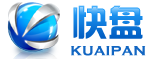
<style>
.page{position:relative;width:153px;height:59px;background:#ffffff}
.page>*{position:absolute;margin:0}
.t1{font:36px "¹ã½Ý¾ÓÃÔÄã×Ö¿â"}
.t2{font:17px "CopperplateGothic-Bold";color:#1266c2}
</style>
<div class="page">
<p class="t1" style="left:73px;top:5px;width:70px;height:34px">快盘</p>
<p class="t2" style="left:71px;top:46px;width:75px;height:10px">kuaipan</p>
</div>
